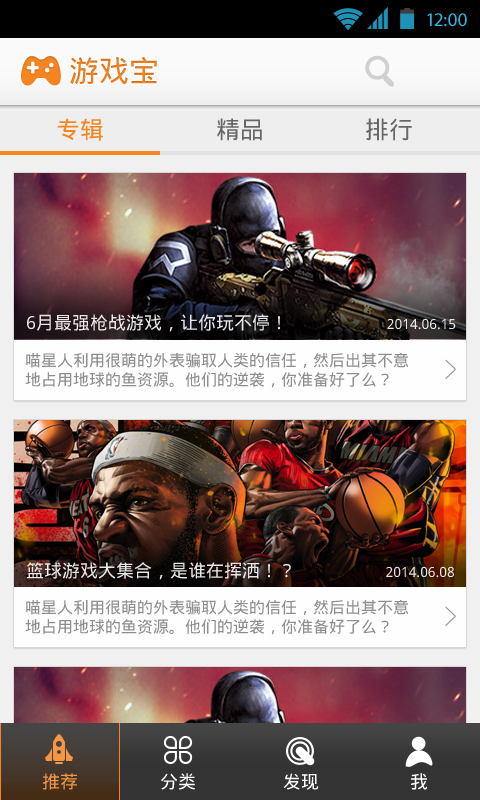
<style>
.page{position:relative;width:480px;height:800px}
.page>*{position:absolute;margin:0}
.t1{font:19.4px "MyriadPro-Regular";color:#33b5e5}
.t2{font:30px "DroidSansFallback";color:#f68521}
.t3{font:24px "DroidSansFallback";color:#f68521}
.t4{font:24px "DroidSansFallback";color:#676767}
.t5{font:18px "DroidSansFallback";color:#fefefe}
.t6{font:14px "DroidSansFallback";color:#fefefe}
.t7{font:16px "DroidSansFallback";color:#8e8e8e}
.t8{font:18px "DroidSansFallback";color:#f49643}
.t9{font:18px "DroidSansFallback";color:#ffffff}
</style>
<div class="page">
<p class="t1" style="left:427px;top:13px;width:40px;height:14px">12:00</p>
<p class="t2" style="left:70px;top:57px;width:87px;height:28px">游戏宝</p>
<p class="t3" style="left:57px;top:118px;width:46px;height:23px">专辑</p>
<p class="t4" style="left:217px;top:118px;width:45px;height:23px">精品</p>
<p class="t4" style="left:366px;top:118px;width:46px;height:23px">排行</p>
<p class="t5" style="left:27px;top:314px;width:429px;height:18px;opacity:0.9">6月最强枪战游戏，让你玩不停！                     <span class="t6">2014.06.15</span></p>
<p class="t7" style="left:25px;top:353px;width:384px;height:35px">喵星人利用很萌的外表骗取人类的信任，然后出其不意<br>地占用地球的鱼资源。他们的逆袭，你准备好了么？</p>
<p class="t5" style="left:27px;top:562px;width:427px;height:18px;opacity:0.9">篮球游戏大集合，是谁在挥洒！？                   <span class="t6">2014.06.08</span></p>
<p class="t7" style="left:25px;top:600px;width:384px;height:35px">喵星人利用很萌的外表骗取人类的信任，然后出其不意<br>地占用地球的鱼资源。他们的逆袭，你准备好了么？</p>
<p class="t8" style="left:42px;top:773px;width:35px;height:17px">推荐</p>
<p class="t9" style="left:161px;top:773px;width:34px;height:17px">分类</p>
<p class="t9" style="left:283px;top:773px;width:36px;height:17px">发现</p>
<p class="t9" style="left:411px;top:773px;width:17px;height:17px">我</p>
</div>
